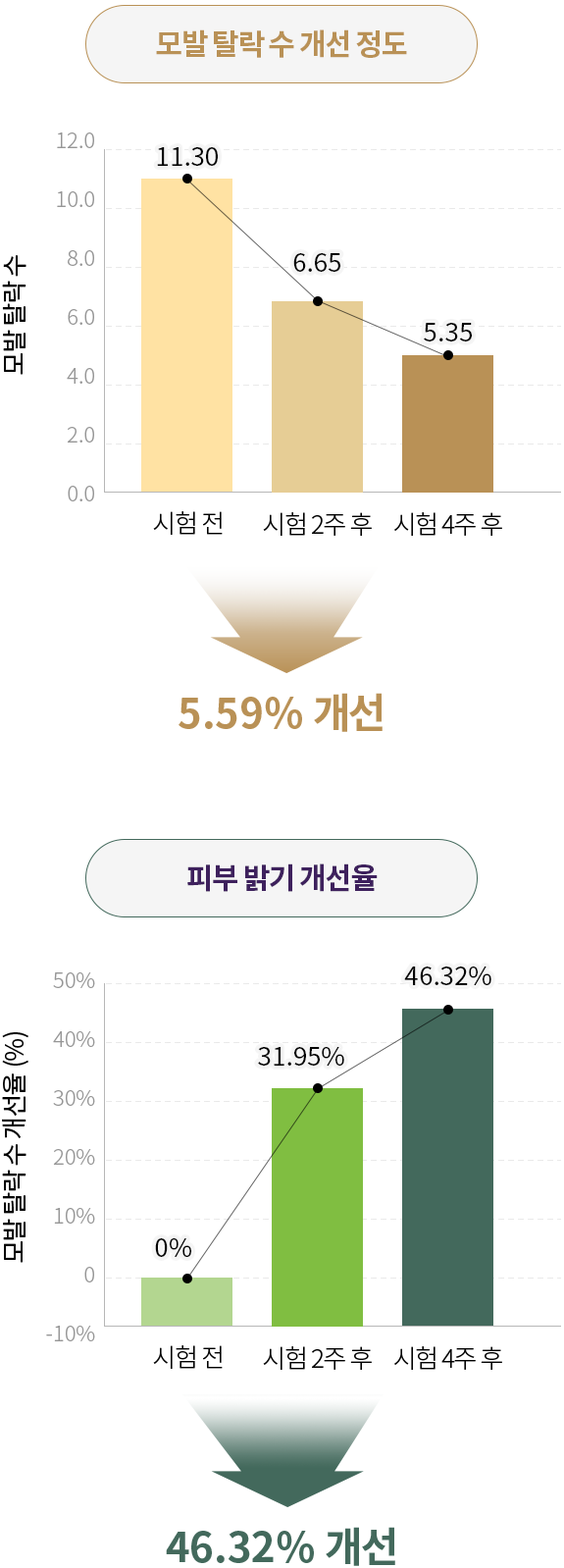
<style>
.page{position:relative;width:564px;height:1568px;background:#ffffff}
.page>*{position:absolute;margin:0}
.t1{font:29.4px "NotoSansCJKkr-Bold";letter-spacing:-0.05em;color:#b99156}
.t2{font:21.6px/58.9px "NotoSansCJKkr-Light";color:#969696}
.t3{font:25.5px "NotoSansCJKkr-Regular";color:#000000}
.t4{font:25.5px "NotoSansCJKkr-Regular";letter-spacing:-0.05em;color:#000000}
.t5{font:25.5px "NotoSansCJKkr-Light";letter-spacing:-0.05em;color:#000000}
.t6{font:41.2px "NotoSansCJKkr-Bold";color:#b99156}
.t7{font:41.2px "NotoSansCJKkr-Bold";letter-spacing:-0.05em;color:#b99156}
.t8{font:29.4px "NotoSansCJKkr-Bold";letter-spacing:-0.05em;color:#3e215d}
.t9{font:41.2px "NotoSansCJKkr-Bold";color:#43695c}
.t10{font:41.2px "NotoSansCJKkr-Bold";letter-spacing:-0.05em;color:#43695c}
</style>
<div class="page">
<p class="t1" style="left:156px;top:29px;width:251px;height:29px">모발 탈락 수 개선 정도</p>
<p class="t2" style="left:57px;top:132px;width:37px;height:369px;text-align:right">12.0<br>10.0<br>8.0<br>6.0<br>4.0<br>2.0<br>0.0</p>
<p class="t3" style="left:157px;top:147px;width:61px;height:19px">11.30</p>
<p class="t4" style="left:2px;top:255px;width:24px;height:120px;rotate:-90deg">모발 탈락 수</p>
<p class="t3" style="left:293px;top:253px;width:47px;height:19px">6.65</p>
<p class="t3" style="left:424px;top:323px;width:48px;height:18px">5.35</p>
<p class="t5" style="left:153px;top:511px;width:70px;height:24px">시험 전</p>
<p class="t5" style="left:263px;top:512px;width:109px;height:24px">시험 2주 후</p>
<p class="t5" style="left:394px;top:512px;width:108px;height:24px">시험 4주 후</p>
<p class="t6" style="left:179px;top:693px;width:204px;height:39px">5.59% <span class="t7">개선</span></p>
<p class="t8" style="left:187px;top:863px;width:191px;height:29px">피부 밝기 개선율</p>
<p class="t2" style="left:46px;top:972px;width:49px;height:369px;text-align:right">50%<br>40%<br>30%<br>20%<br>10%<br>0<br>-10%</p>
<p class="t3" style="left:404px;top:967px;width:88px;height:18px">46.32%</p>
<p class="t4" style="left:2px;top:1032px;width:26px;height:231px;rotate:-90deg">모발 탈락 수 개선율 (%)</p>
<p class="t3" style="left:258px;top:1047px;width:86px;height:19px">31.95%</p>
<p class="t3" style="left:155px;top:1238px;width:36px;height:19px">0%</p>
<p class="t5" style="left:153px;top:1345px;width:70px;height:24px">시험 전</p>
<p class="t5" style="left:263px;top:1346px;width:109px;height:24px">시험 2주 후</p>
<p class="t5" style="left:394px;top:1346px;width:108px;height:24px">시험 4주 후</p>
<p class="t9" style="left:166px;top:1527px;width:229px;height:39px">46.32% <span class="t10">개선</span></p>
</div>
